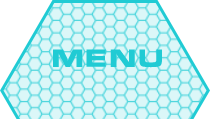
<style>
.page{position:relative;width:210px;height:119px;background:#dbf7f8}
.page>*{position:absolute;margin:0}
.t1{font:24px "MicrogrammaBold";color:#20cbd4}
</style>
<div class="page">
<p class="t1" style="left:53px;top:49px;width:109px;height:19px">MENU</p>
</div>
